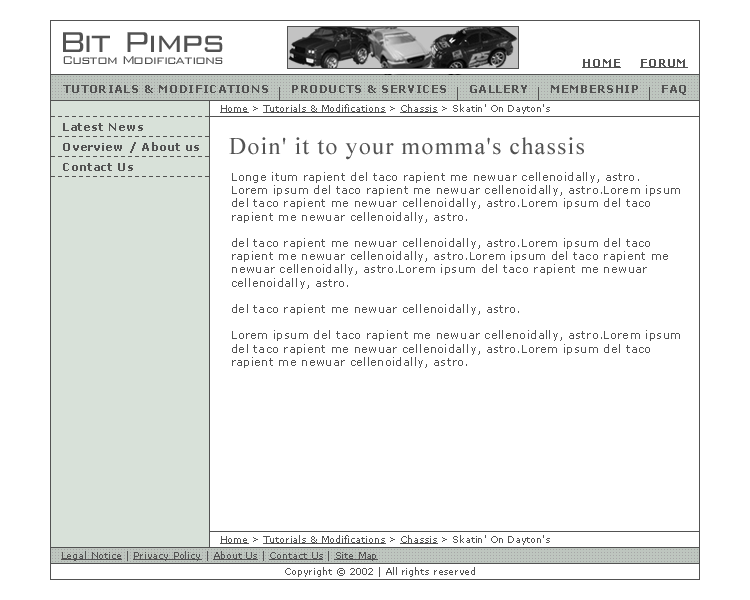
<style>
.page{position:relative;width:750px;height:600px;background:#ffffff}
.page>*{position:absolute;margin:0}
.t1{font:30px "WallStreet";letter-spacing:0.05em;color:#525252}
.t2{font:12px "WallStreet";letter-spacing:0.05em;color:#525252}
.t3{font:11px "Verdana-Bold";letter-spacing:0.05em;color:#525252;text-decoration:underline}
.t4{font:11px "Verdana-Bold";letter-spacing:0.05em;color:#525252}
.t5{font:9px "Verdana";letter-spacing:0.05em;color:#525252;text-decoration:underline}
.t6{font:9px "Verdana";letter-spacing:0.05em;color:#525252}
.t7{font:24px "TimesNewRomanPSMT";letter-spacing:0.05em;color:#525252}
.t8{font:11px "Verdana";letter-spacing:0.05em;color:#525252}
</style>
<div class="page">
<p class="t1" style="left:63px;top:32px;width:160px;height:20px">Bit Pimps</p>
<p class="t2" style="left:63px;top:56px;width:160px;height:8px">Custom Modifications</p>
<p class="t3" style="left:582px;top:59px;width:39px;height:9px">HOME</p>
<p class="t3" style="left:640px;top:59px;width:48px;height:9px">FORUM</p>
<p class="t4" style="left:63px;top:85px;width:205px;height:8px">TUTORIALS &amp; MODIFICATIONS</p>
<p class="t4" style="left:292px;top:85px;width:154px;height:8px">PRODUCTS &amp; SERVICES</p>
<p class="t4" style="left:470px;top:85px;width:57px;height:8px">GALLERY</p>
<p class="t4" style="left:551px;top:85px;width:87px;height:8px">MEMBERSHIP</p>
<p class="t4" style="left:662px;top:85px;width:24px;height:10px">FAQ</p>
<p class="t5" style="left:220px;top:104px;width:330px;height:10px">Home<span class="t6"> &gt; </span>Tutorials &amp; Modifications<span class="t6"> &gt; </span>Chassis<span class="t6"> &gt; Skatin' On Dayton's</span></p>
<p class="t4" style="left:63px;top:123px;width:80px;height:8px">Latest News</p>
<p class="t7" style="left:229px;top:137px;width:355px;height:23px">Doin' it to your momma's chassis</p>
<p class="t4" style="left:63px;top:142px;width:136px;height:11px">Overview / About us</p>
<p class="t4" style="left:63px;top:163px;width:70px;height:8px">Contact Us</p>
<p class="t8" style="left:232px;top:172px;width:448px;height:196px">Longe itum rapient del taco rapient me newuar cellenoidally, astro.<br>Lorem ipsum del taco rapient me newuar cellenoidally, astro.Lorem ipsum <br>del taco rapient me newuar cellenoidally, astro.Lorem ipsum del taco <br>rapient me newuar cellenoidally, astro.<br><br>del taco rapient me newuar cellenoidally, astro.Lorem ipsum del taco <br>rapient me newuar cellenoidally, astro.Lorem ipsum del taco rapient me <br>newuar cellenoidally, astro.Lorem ipsum del taco rapient me newuar <br>cellenoidally, astro.<br><br>del taco rapient me newuar cellenoidally, astro.<br><br>Lorem ipsum del taco rapient me newuar cellenoidally, astro.Lorem ipsum <br>del taco rapient me newuar cellenoidally, astro.Lorem ipsum del taco <br>rapient me newuar cellenoidally, astro.</p>
<p class="t5" style="left:220px;top:535px;width:330px;height:10px">Home<span class="t6"> &gt; </span>Tutorials &amp; Modifications<span class="t6"> &gt; </span>Chassis<span class="t6"> &gt; Skatin' On Dayton's</span></p>
<p class="t5" style="left:61px;top:551px;width:317px;height:10px">Legal Notice<span class="t6"> | </span>Privacy Policy<span class="t6"> | </span>About Us<span class="t6"> | </span>Contact Us<span class="t6"> | </span>Site Map</p>
<p class="t6" style="left:285px;top:567px;width:190px;height:10px">Copyright © 2002 | All rights reserved</p>
</div>
